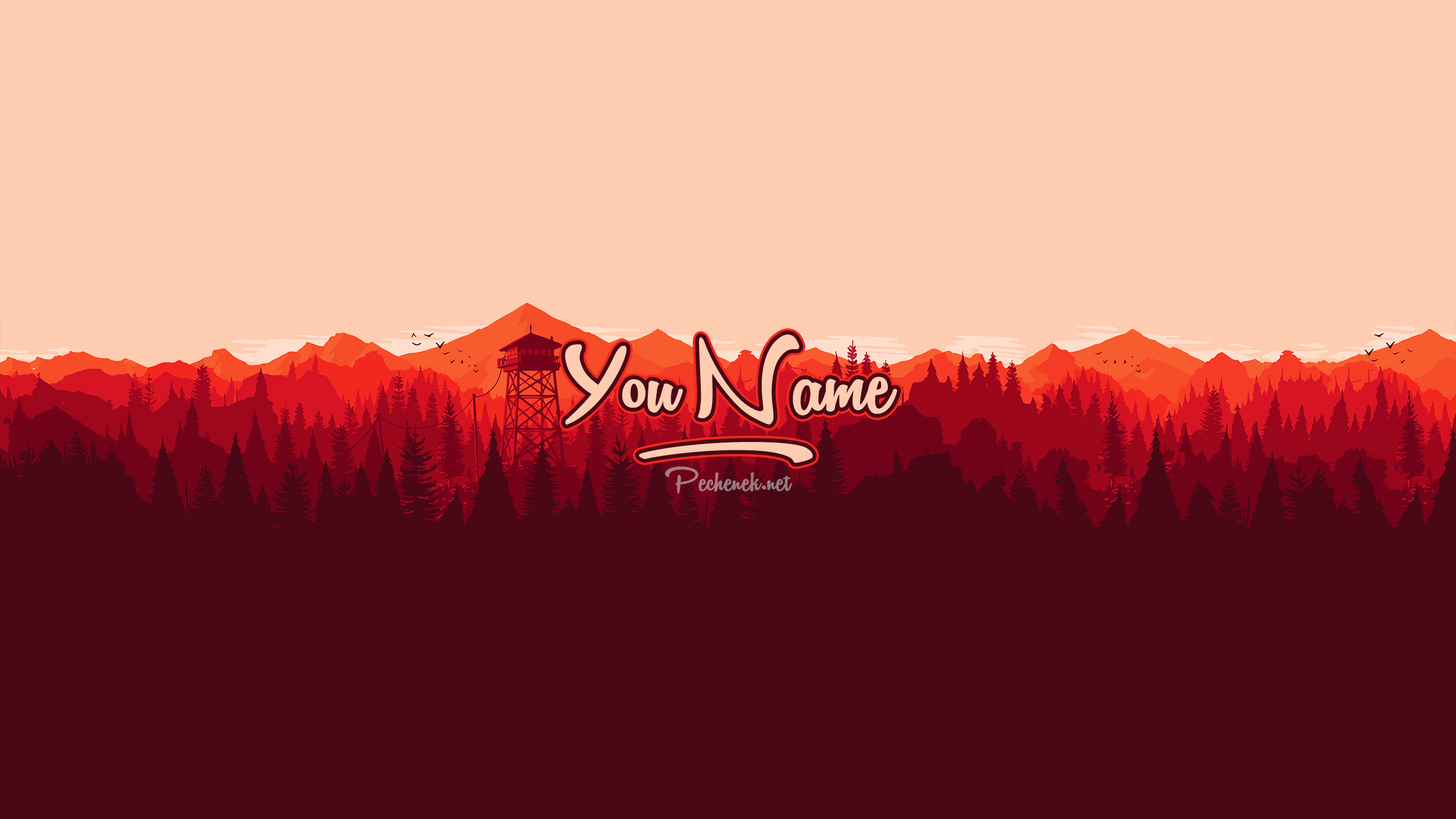
<style>
.page{position:relative;width:1456px;height:819px;background:#feccb0}
.page>*{position:absolute;margin:0}
.t1{font:113.7px "Vantom";color:#feccb0}
.t2{font:113.7px "VantomSwash";color:#feccb0}
.t3{font:37.9px "Vantom";color:#a67b80}
</style>
<div class="page">
<p class="t1" style="left:565px;top:334px;width:332px;height:91px">You Name</p>
<p class="t2" style="left:639px;top:442px;width:174px;height:21px">L Ik</p>
<p class="t3" style="left:665px;top:466px;width:127px;height:28px">Pechenek.net</p>
</div>
